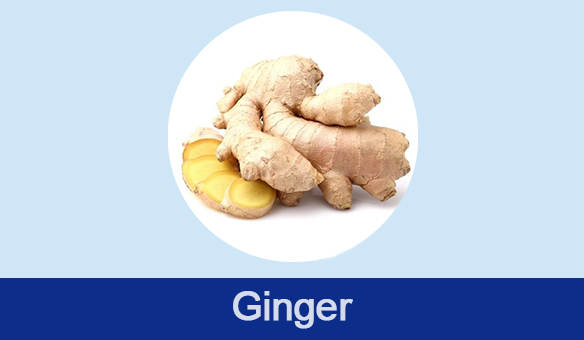
<style>
.page{position:relative;width:584px;height:340px;background:#cee6f6}
.page>*{position:absolute;margin:0}
.t1{font:40.2px "ArialMT";letter-spacing:-0.03em;color:#d4dbed;font-weight:bold}
</style>
<div class="page">
<p class="t1" style="left:233px;top:291px;width:120px;height:38px">Ginger</p>
</div>
